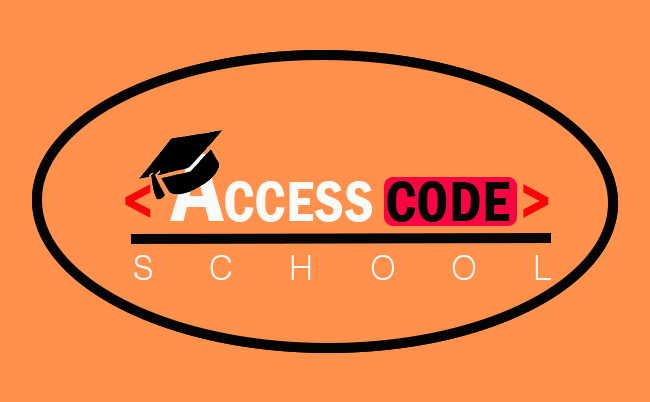
<style>
.page{position:relative;width:650px;height:402px;background:#ff914c}
.page>*{position:absolute;margin:0}
.t1{font:58.3px "FranklinGothic-DemiCond";color:#fafaf7}
.t2{font:58.3px "FranklinGothic-DemiCond";color:#f70707}
.t3{font:100px "FranklinGothic-DemiCond";color:#fafaf7}
.t4{font:58.3px "FranklinGothic-DemiCond";color:#040404}
.t5{font:33.3px "Helvetica-Light";letter-spacing:1.68em;color:#fcfbfb}
</style>
<div class="page">
<p class="t1" style="left:125px;top:154px;width:424px;height:68px"><span class="t2">&lt;</span><span class="t3"> A</span>CCESS <span class="t4">CODE </span><span class="t2">&gt;</span></p>
<p class="t1" style="left:125px;top:154px;width:424px;height:68px"><span class="t2">&lt;</span><span class="t3"> A</span>CCESS <span class="t4">CODE </span><span class="t2">&gt;</span></p>
<p class="t5" style="left:134px;top:255px;width:417px;height:25px">SCHOOL</p>
<p class="t5" style="left:134px;top:255px;width:417px;height:25px">SCHOOL</p>
</div>
